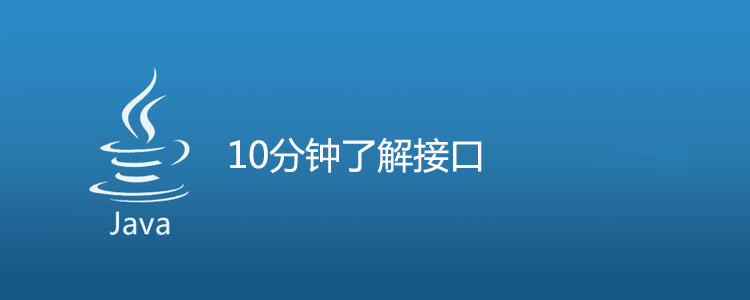
<style>
.page{position:relative;width:750px;height:300px}
.page>*{position:absolute;margin:0}
.t1{font:36px "MicrosoftYaHei";color:#fefafa}
</style>
<div class="page">
<p class="t1" style="left:230px;top:137px;width:252px;height:36px">10分钟了解接口</p>
</div>
